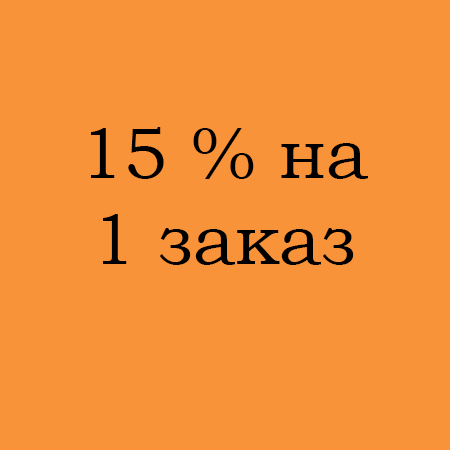
<style>
.page{position:relative;width:450px;height:450px;background:#f89339}
.page>*{position:absolute;margin:0}
.t1{font:72px "BookmanOldStyle";color:#000000}
</style>
<div class="page">
<p class="t1" style="left:91px;top:127px;width:277px;height:138px;text-align:center">15 % на<br>1 заказ</p>
</div>
